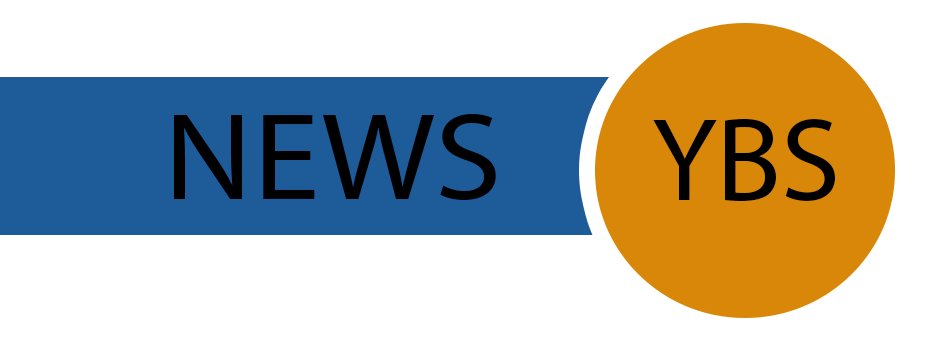
<style>
.page{position:relative;width:934px;height:360px;background:#ffffff}
.page>*{position:absolute;margin:0}
.t1{font:124.7px "MyriadPro-Regular";color:#000000;scale:1.08 1}
.t2{font:119.4px "MyriadPro-Regular";color:#000000}
</style>
<div class="page">
<p class="t1" style="left:174px;top:114px;width:322px;height:86px">NEWS</p>
<p class="t2" style="left:653px;top:119px;width:182px;height:82px">YBS</p>
</div>
